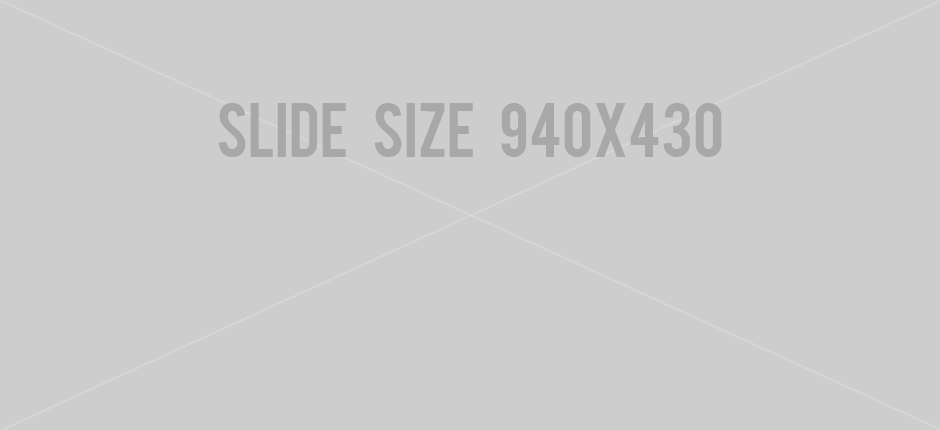
<style>
.page{position:relative;width:940px;height:430px;background:#cdcdcd}
.page>*{position:absolute;margin:0}
.t1{font:60px "Bebas";color:#a8a8a8}
</style>
<div class="page">
<p class="t1" style="left:218px;top:103px;width:504px;height:54px">slide    size    940x430</p>
</div>
